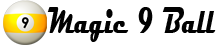
<style>
.page{position:relative;width:218px;height:45px;background:#ffffff}
.page>*{position:absolute;margin:0}
.t1{font:38.4px "Magneto-Bold";color:#010101;scale:0.62 1}
</style>
<div class="page">
<p class="t1" style="left:47px;top:7px;width:169px;height:35px">Magic 9 Ball</p>
</div>
